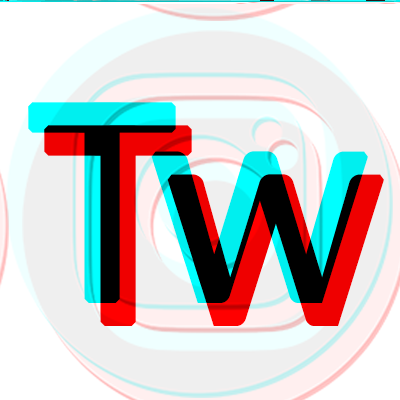
<style>
.page{position:relative;width:400px;height:400px;background:#efefef}
.page>*{position:absolute;margin:0}
.t1{font:299.9px "Carlito";letter-spacing:-0.06em;font-weight:bold}
</style>
<div class="page">
<p class="t1" style="left:28px;top:100px;width:340px;height:201px">Tw</p>
</div>
